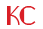
<style>
.page{position:relative;width:43px;height:29px;background:#ffffff}
.page>*{position:absolute;margin:0}
.t1{font:27.4px "FashionVictim";letter-spacing:0.025em;color:#d91f26;text-transform:uppercase;scale:0.91 1}
</style>
<div class="page">
<p class="t1" style="left:7px;top:6px;width:29px;height:19px">KC</p>
</div>
